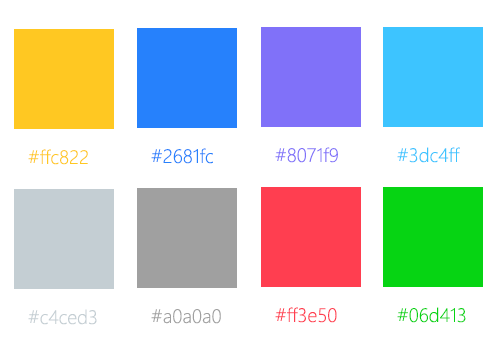
<style>
.page{position:relative;width:500px;height:347px;background:#ffffff}
.page>*{position:absolute;margin:0}
.t1{font:18px "MicrosoftYaHeiLight";color:#ffc822}
.t2{font:18px "MicrosoftYaHeiLight";color:#2681fc}
.t3{font:18px "MicrosoftYaHeiLight";color:#8071f9}
.t4{font:18px "MicrosoftYaHeiLight";color:#3dc4ff}
.t5{font:18px "MicrosoftYaHeiLight";color:#c4ced3}
.t6{font:18px "MicrosoftYaHeiLight";color:#a0a0a0}
.t7{font:18px "MicrosoftYaHeiLight";color:#ff3e50}
.t8{font:18px "MicrosoftYaHeiLight";color:#06d413}
</style>
<div class="page">
<p class="t1" style="left:28px;top:149px;width:60px;height:16px">#ffc822</p>
<p class="t2" style="left:151px;top:148px;width:62px;height:16px">#2681fc</p>
<p class="t3" style="left:275px;top:147px;width:63px;height:16px">#8071f9</p>
<p class="t4" style="left:397px;top:147px;width:63px;height:16px">#3dc4ff</p>
<p class="t5" style="left:28px;top:309px;width:69px;height:16px">#c4ced3</p>
<p class="t6" style="left:151px;top:309px;width:70px;height:15px">#a0a0a0</p>
<p class="t7" style="left:275px;top:307px;width:62px;height:16px">#ff3e50</p>
<p class="t8" style="left:397px;top:307px;width:69px;height:16px">#06d413</p>
</div>
